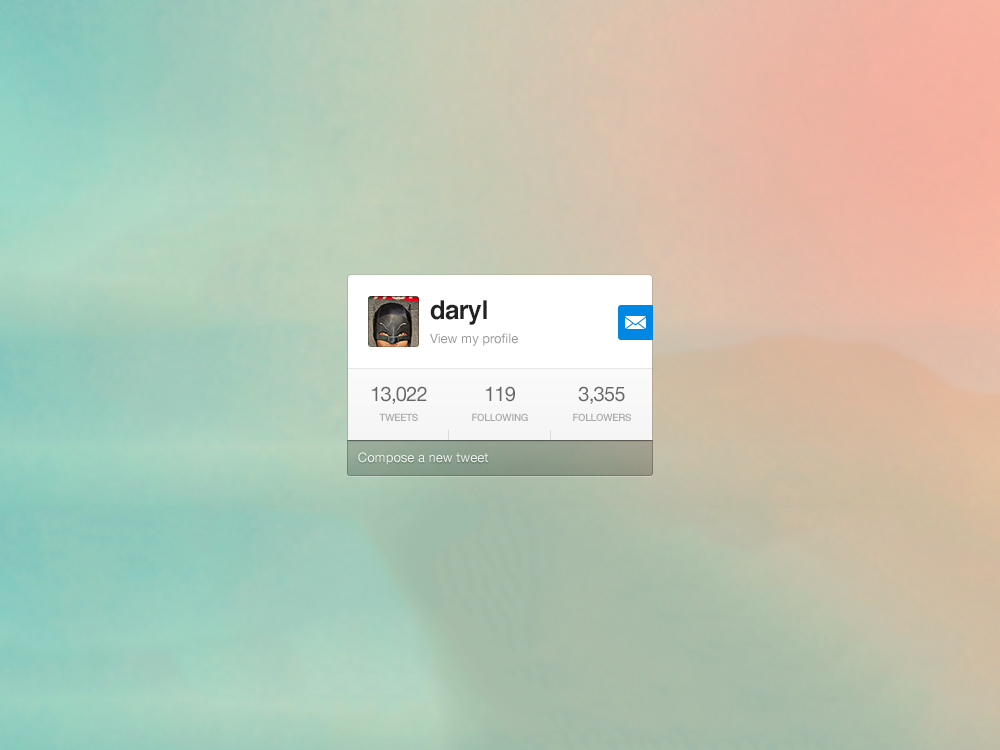
<style>
.page{position:relative;width:1000px;height:750px}
.page>*{position:absolute;margin:0}
.t1{font:26px "Helvetica-Bold";letter-spacing:-0.035em;color:#222222}
.t2{font:13px "HelveticaNeue";color:#999999}
.t3{font:20px "HelveticaNeue";letter-spacing:-0.035em;color:#666666}
.t4{font:10px "HelveticaNeue-Medium";letter-spacing:-0.035em;color:#aaaaaa}
.t5{font:13px "HelveticaNeue";color:#ffffff}
</style>
<div class="page">
<p class="t1" style="left:430px;top:300px;width:57px;height:25px">daryl</p>
<p class="t2" style="left:430px;top:333px;width:88px;height:13px">View my profile</p>
<p class="t3" style="left:371px;top:386px;width:56px;height:18px">13,022</p>
<p class="t3" style="left:485px;top:386px;width:30px;height:16px">119</p>
<p class="t3" style="left:578px;top:386px;width:47px;height:18px">3,355</p>
<p class="t4" style="left:379px;top:413px;width:39px;height:8px">TWEETS</p>
<p class="t4" style="left:472px;top:413px;width:56px;height:8px">FOLLOWING</p>
<p class="t4" style="left:573px;top:413px;width:58px;height:8px">FOLLOWERS</p>
<p class="t5" style="left:358px;top:452px;width:130px;height:13px">Compose a new tweet</p>
</div>
